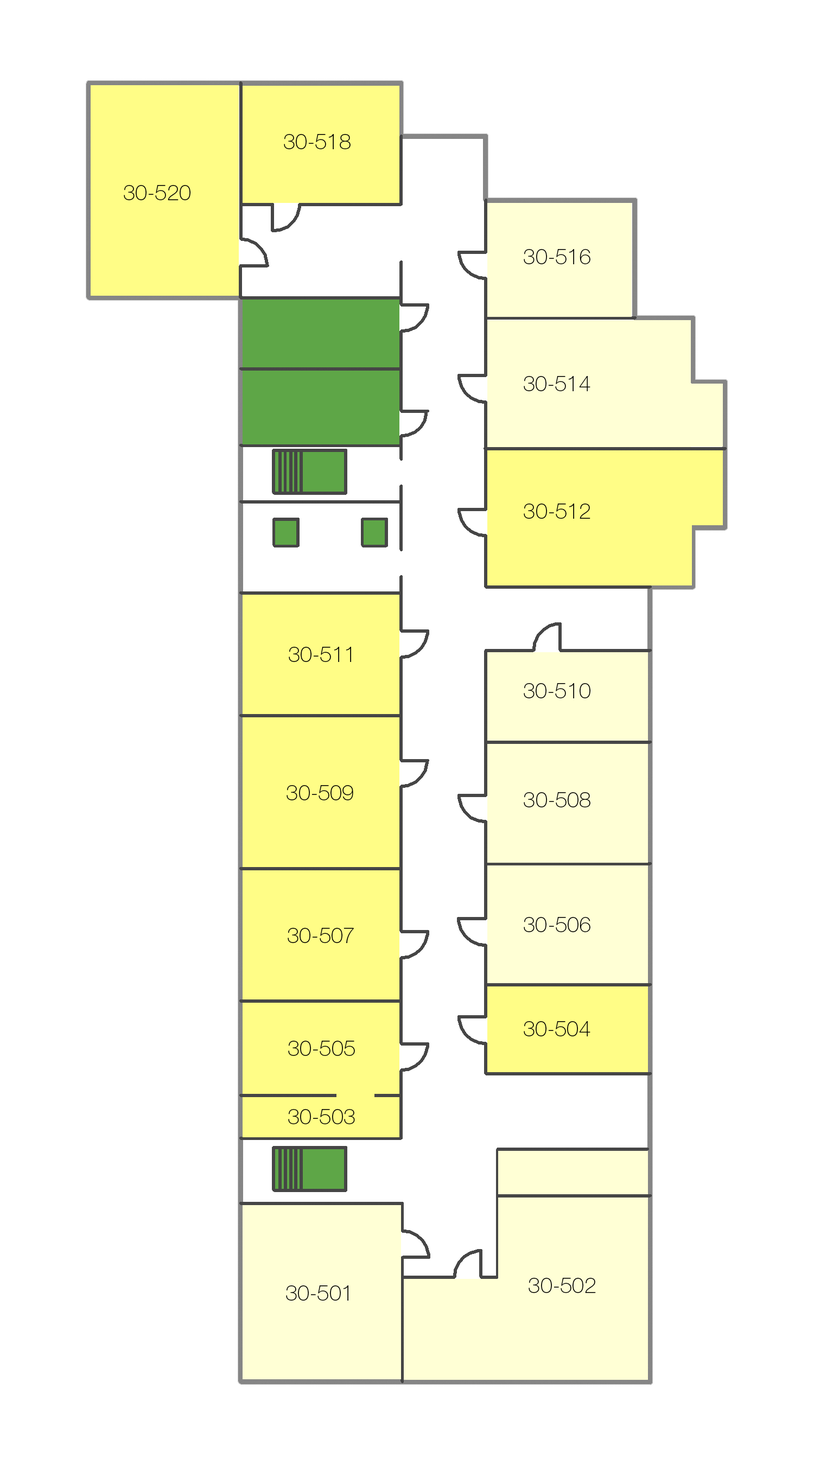
<style>
.page{position:relative;width:814px;height:1465px;background:#ffffff}
.page>*{position:absolute;margin:0}
.t1{font:21.7px "HelveticaNeueCyr-Thin";color:#000000;font-variant:small-caps}
</style>
<div class="page">
<p class="t1" style="left:284px;top:134px;width:67px;height:15px">30-518</p>
<p class="t1" style="left:124px;top:185px;width:66px;height:15px">30-520</p>
<p class="t1" style="left:524px;top:249px;width:66px;height:15px">30-516</p>
<p class="t1" style="left:524px;top:376px;width:66px;height:15px">30-514</p>
<p class="t1" style="left:524px;top:504px;width:66px;height:15px">30-512</p>
<p class="t1" style="left:289px;top:647px;width:62px;height:15px">30-511</p>
<p class="t1" style="left:524px;top:683px;width:66px;height:15px">30-510</p>
<p class="t1" style="left:286px;top:785px;width:67px;height:15px">30-509</p>
<p class="t1" style="left:524px;top:792px;width:66px;height:15px">30-508</p>
<p class="t1" style="left:524px;top:917px;width:66px;height:15px">30-506</p>
<p class="t1" style="left:288px;top:928px;width:66px;height:15px">30-507</p>
<p class="t1" style="left:524px;top:1021px;width:66px;height:15px">30-504</p>
<p class="t1" style="left:288px;top:1041px;width:67px;height:15px">30-505</p>
<p class="t1" style="left:288px;top:1109px;width:67px;height:15px">30-503</p>
<p class="t1" style="left:529px;top:1278px;width:67px;height:15px">30-502</p>
<p class="t1" style="left:286px;top:1285px;width:62px;height:16px">30-501</p>
</div>
